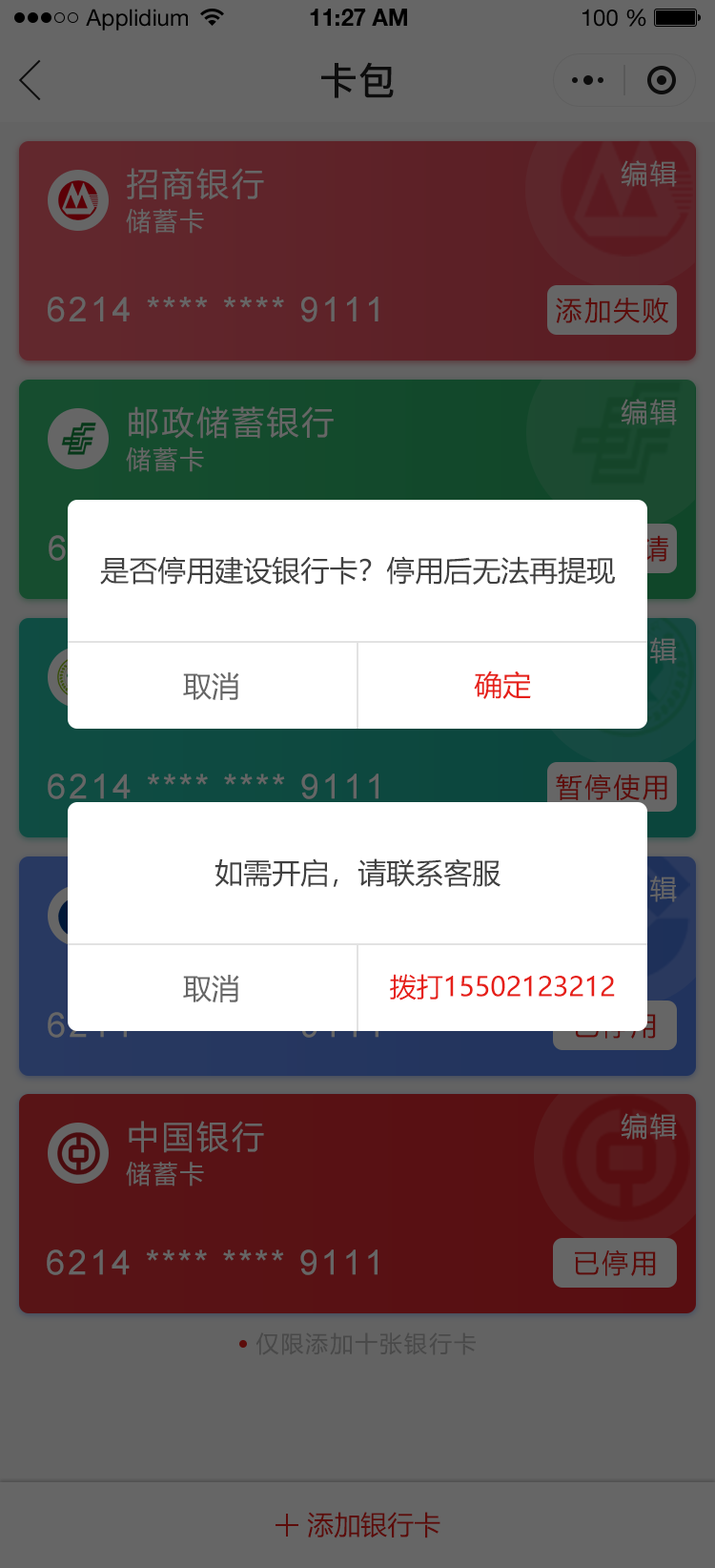
<style>
.page{position:relative;width:715px;height:1568px;background:#ffffff}
.page>*{position:absolute;margin:0}
.t1{font:22.9px "HelveticaNeueLTStd-Roman";color:#000000}
.t2{font:22.9px "HelveticaNeueLTStd-Bd";color:#000000}
.t3{font:38.2px "PingFang-SC-Bold";color:#202020;text-transform:uppercase}
.t4{font:26.7px "MicrosoftYaHei";letter-spacing:0.08em;color:#666666}
.t5{font:32.4px "MicrosoftYaHei";letter-spacing:0.08em;color:#666666}
.t6{font:24.8px "MicrosoftYaHei";letter-spacing:0.08em;color:#666666}
.t7{font:34.3px "ArialMT";letter-spacing:0.08em;color:#666666}
.t8{font:26.7px "MicrosoftYaHei";letter-spacing:0.08em;color:#5c0c0a}
.t9{font:28.6px "MicrosoftYaHei";color:#404040;text-transform:uppercase}
.t10{font:28.6px "MicrosoftYaHei";color:#666666;text-transform:uppercase}
.t11{font:28.6px "MicrosoftYaHei";color:#e61f18;text-transform:uppercase}
.t12{font:26.7px "MicrosoftYaHei";color:#e61f18;text-transform:uppercase}
.t13{font:22.9px "MicrosoftYaHei";letter-spacing:0.08em;color:#494949}
.t14{font:26.7px "MicrosoftYaHei";color:#5c0c0a;text-transform:uppercase}
</style>
<div class="page">
<p class="t1" style="left:86px;top:9px;width:102px;height:22px">Applidium</p>
<p class="t2" style="left:310px;top:9px;width:97px;height:17px">11:27 AM</p>
<p class="t1" style="left:583px;top:9px;width:64px;height:18px">100 %</p>
<p class="t3" style="left:321px;top:62px;width:73px;height:36px">卡包</p>
<p class="t4" style="left:621px;top:160px;width:56px;height:27px">编辑</p>
<p class="t5" style="left:127px;top:168px;width:137px;height:32px">招商银行</p>
<p class="t6" style="left:126px;top:209px;width:78px;height:25px">储蓄卡</p>
<p class="t7" style="left:48px;top:297px;width:331px;height:25px">6214 **** **** 9111</p>
<p class="t8" style="left:556px;top:298px;width:114px;height:26px">添加失败</p>
<p class="t4" style="left:621px;top:399px;width:56px;height:26px">编辑</p>
<p class="t5" style="left:129px;top:406px;width:205px;height:33px">邮政储蓄银行</p>
<p class="t6" style="left:126px;top:447px;width:78px;height:25px">储蓄卡</p>
<p class="t9" style="left:100px;top:556px;width:515px;height:29px">是否停用建设银行卡？停用后无法再提现</p>
<p class="t10" style="left:183px;top:672px;width:56px;height:28px">取消</p>
<p class="t11" style="left:474px;top:671px;width:57px;height:28px">确定</p>
<p class="t7" style="left:48px;top:774px;width:331px;height:25px">6214 **** **** 9111</p>
<p class="t8" style="left:556px;top:774px;width:112px;height:26px">暂停使用</p>
<p class="t9" style="left:215px;top:858px;width:286px;height:29px">如需开启，请联系客服</p>
<p class="t10" style="left:183px;top:975px;width:56px;height:27px">取消</p>
<p class="t12" style="left:390px;top:974px;width:225px;height:27px">拨打15502123212</p>
<p class="t5" style="left:129px;top:1121px;width:135px;height:32px">中国银行</p>
<p class="t4" style="left:621px;top:1113px;width:56px;height:27px">编辑</p>
<p class="t6" style="left:126px;top:1162px;width:78px;height:24px">储蓄卡</p>
<p class="t7" style="left:47px;top:1249px;width:331px;height:26px">6214 **** **** 9111</p>
<p class="t8" style="left:575px;top:1249px;width:81px;height:27px">已停用</p>
<p class="t13" style="left:256px;top:1332px;width:220px;height:23px">仅限添加十张银行卡</p>
<p class="t14" style="left:307px;top:1512px;width:134px;height:26px">添加银行卡</p>
</div>
